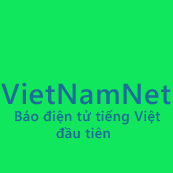
<style>
.page{position:relative;width:173px;height:173px;background:#10e75c}
.page>*{position:absolute;margin:0}
.t1{font:29px "SegoeWP-Semibold";letter-spacing:0.025em;color:#1d6d9b}
.t2{font:14px "SegoeWP-Semibold";letter-spacing:0.025em;color:#1d6d9b}
</style>
<div class="page">
<p class="t1" style="left:1px;top:82px;width:170px;height:23px">VietNamNet</p>
<p class="t2" style="left:15px;top:110px;width:146px;height:29px">Báo điện tử tiếng Việt<br>          đầu tiên</p>
</div>
